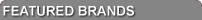
<style>
.page{position:relative;width:202px;height:20px;background:#858585}
.page>*{position:absolute;margin:0}
.t1{font:13.3px "Arial-BoldMT";color:#ffffff}
</style>
<div class="page">
<p class="t1" style="left:3px;top:5px;width:131px;height:11px">FEATURED BRANDS</p>
</div>
